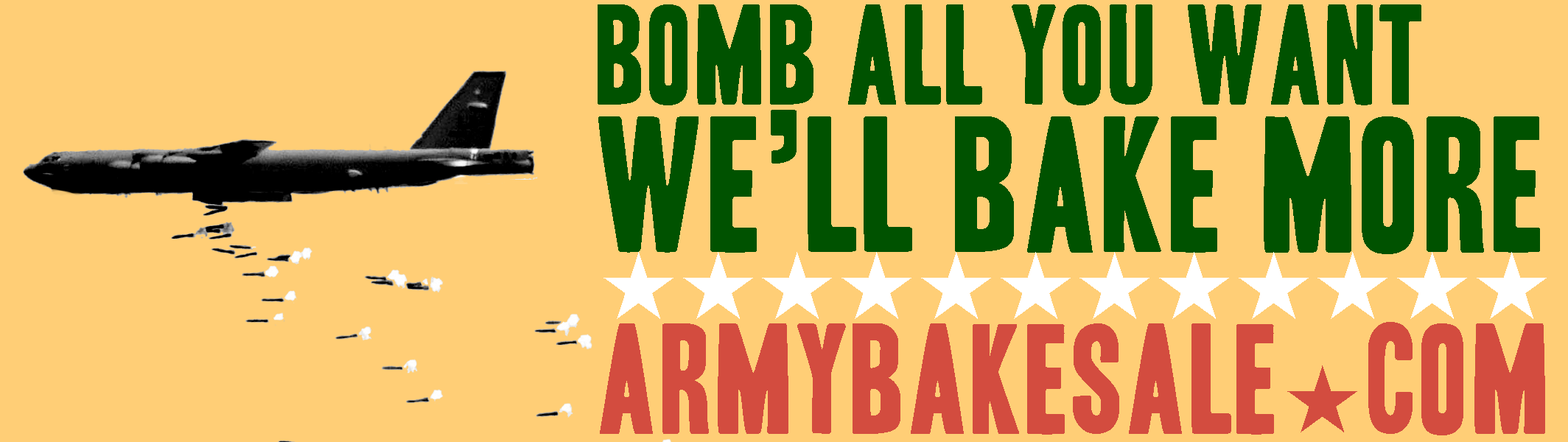
<style>
.page{position:relative;width:1568px;height:442px;background:#ffce76}
.page>*{position:absolute;margin:0}
.t1{font:122.3px/147.4px "HeadlineOneHPLHS";letter-spacing:0.025em;color:#005200;text-transform:uppercase}
.t2{font:166.5px/147.4px "HeadlineOneHPLHS";letter-spacing:0.025em;color:#005200;text-transform:uppercase}
.t3{font:123.8px "AppleSymbols";letter-spacing:-0.025em;color:#ffffff;text-transform:uppercase}
.t4{font:134.8px "HeadlineOneHPLHS";letter-spacing:0.025em;color:#d34c3f;text-transform:uppercase}
.t5{font:123.8px "AppleSymbols";letter-spacing:0.025em;color:#d34c3f;text-transform:uppercase}
</style>
<div class="page">
<p class="t1" style="left:598px;top:4px;width:942px;height:250px">Bomb All You Want<br><span class="t2">We’ll Bake More</span></p>
<p class="t3" style="left:603px;top:252px;width:944px;height:67px">★★★★★★★★★★★★</p>
<p class="t4" style="left:600px;top:322px;width:945px;height:113px">ArmyBakesale<span class="t5">★</span>COM</p>
</div>
